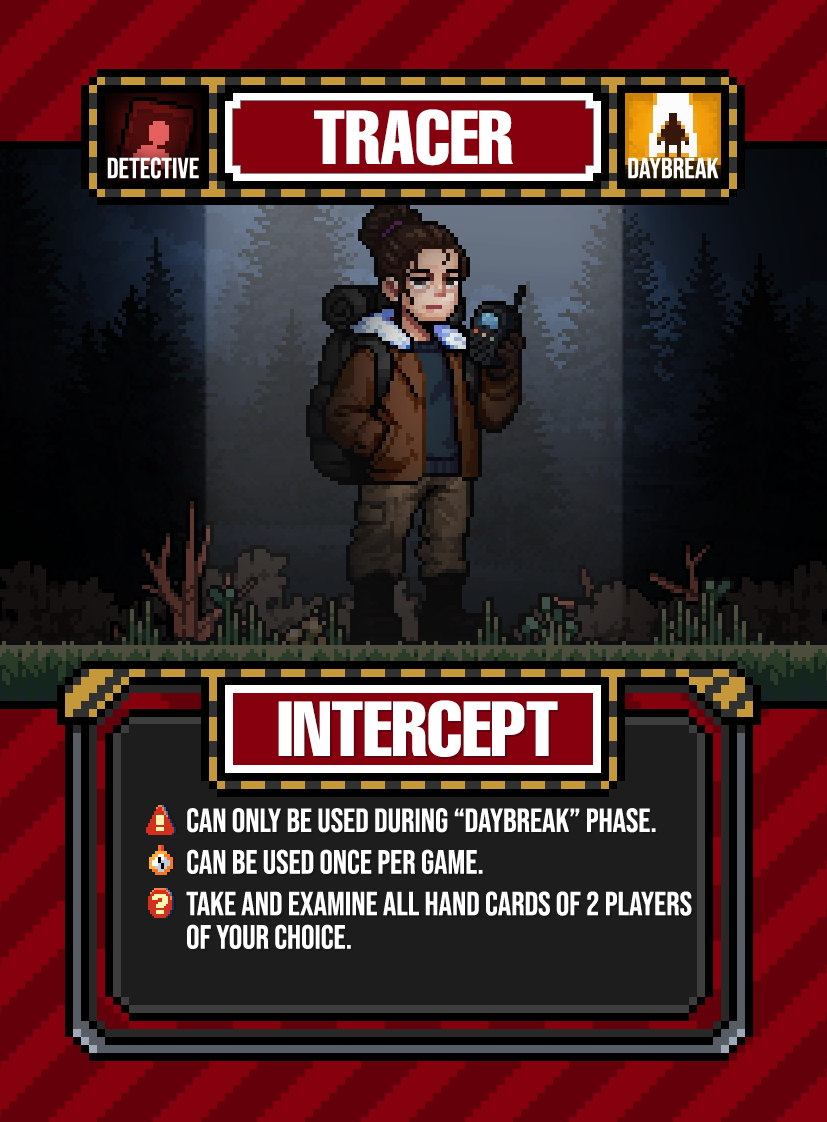
<style>
.page{position:relative;width:827px;height:1122px}
.page>*{position:absolute;margin:0}
.t1{font:75px "HelveticaLTPro-Compressed";color:#ffffff}
.t2{font:76.2px "HelveticaLTPro-Compressed";color:#ffffff}
.t3{font:33.3px/41.7px "BebasNeue-Regular";color:#ffffff}
.t4{font:33.3px/33.3px "BebasNeue-Regular";color:#ffffff}
</style>
<div class="page">
<p class="t1" style="left:314px;top:109px;width:199px;height:57px">TRACER</p>
<p class="t2" style="left:278px;top:700px;width:280px;height:57px">INTERCEPT</p>
<p class="t3" style="left:186px;top:808px;width:506px;height:141px"><span class="t4">can only be used during “daybreak” phase.<br></span>Can be used once per game.<br>take and examine all hand cards of 2 players <br><span class="t4">of your choice.</span></p>
</div>
